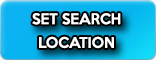
<style>
.page{position:relative;width:156px;height:60px}
.page>*{position:absolute;margin:0}
.t1{font:13.5px/23.7px "KeepCalm-Medium";color:#ffffff}
</style>
<div class="page">
<p class="t1" style="left:32px;top:13px;width:89px;height:36px;text-align:center">SET SEARCH<br>LOCATION</p>
</div>
